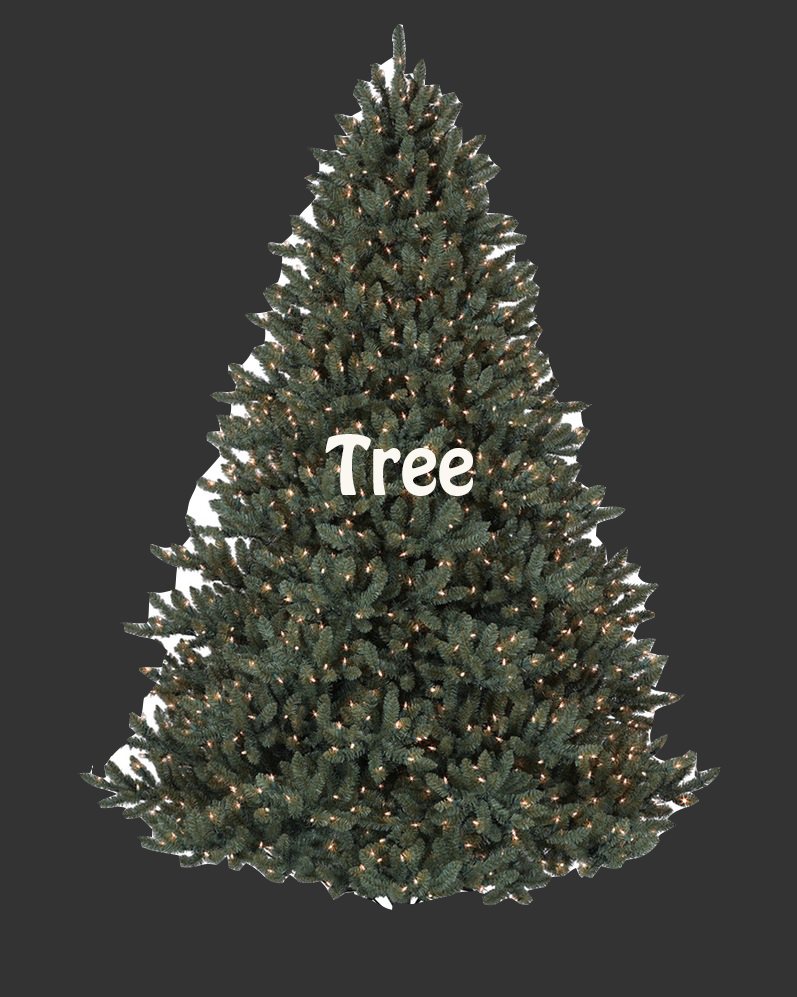
<style>
.page{position:relative;width:797px;height:997px;background:#333333}
.page>*{position:absolute;margin:0}
.t1{font:72px "HoboStd";color:#faf8f0}
</style>
<div class="page">
<p class="t1" style="left:325px;top:434px;width:148px;height:62px">Tree</p>
</div>
